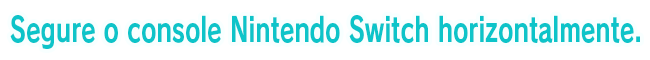
<style>
.page{position:relative;width:650px;height:60px;background:#ffffff}
.page>*{position:absolute;margin:0}
.t1{font:33.3px "RodinPro-B";color:#0dc4c9;scale:0.71 1}
</style>
<div class="page">
<p class="t1" style="left:10px;top:15px;width:630px;height:34px">Segure o console Nintendo Switch horizontalmente.</p>
</div>
